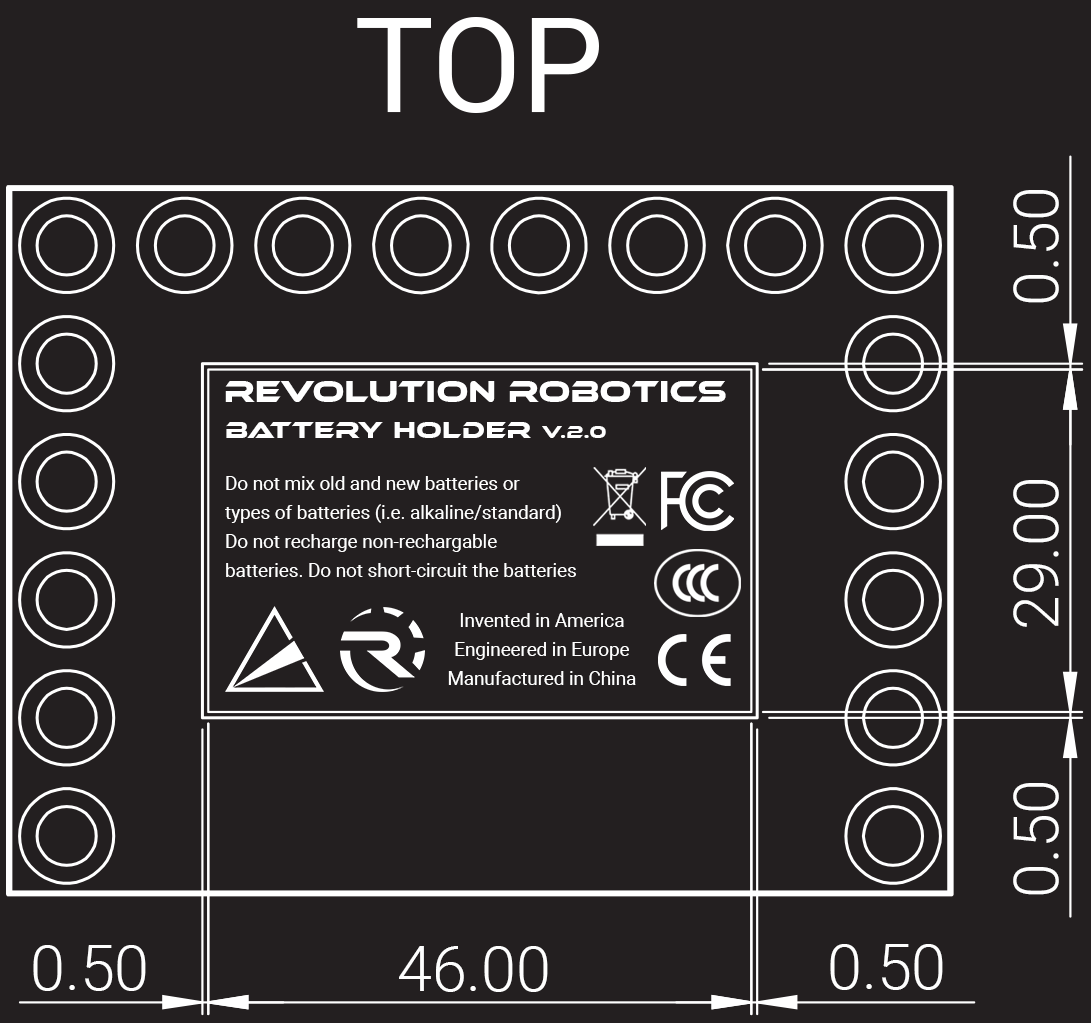
<style>
.page{position:relative;width:1091px;height:1023px;background:#231f20}
.page>*{position:absolute;margin:0}
.t1{font:62.5px "Roboto-Light";color:#fefefe}
.t2{font:29.5px "EthnocentricRg-Regular";letter-spacing:0.025em;color:#ffffff}
.t3{font:23.6px "EthnocentricRg-Regular";letter-spacing:0.04em;color:#ffffff}
.t4{font:17.7px "EthnocentricRg-Regular";letter-spacing:0.04em;color:#ffffff}
.t5{font:18.8px/29.2px "Roboto-Regular";color:#ffffff}
</style>
<div class="page">
<p class="t1" style="left:1013px;top:190px;width:46px;height:113px;rotate:-90deg">0.50</p>
<p class="t2" style="left:225px;top:381px;width:501px;height:21px">Revolution robotics</p>
<p class="t3" style="left:226px;top:422px;width:380px;height:16px">battery holder <span class="t4">v.2.0</span></p>
<p class="t5" style="left:225px;top:476px;width:351px;height:101px">Do not mix old and new batteries or<br>types of batteries (i.e. alkaline/standard)<br>Do not recharge non-rechargable <br>batteries. Do not short-circuit the batteries</p>
<p class="t1" style="left:1013px;top:480px;width:46px;height:147px;rotate:-90deg">29.00</p>
<p class="t5" style="left:448px;top:613px;width:188px;height:72px;text-align:center">Invented in America<br>Engineered in Europe<br>Manufactured in China</p>
<p class="t1" style="left:1013px;top:783px;width:46px;height:112px;rotate:-90deg">0.50</p>
<p class="t1" style="left:33px;top:945px;width:113px;height:46px">0.50</p>
<p class="t1" style="left:399px;top:946px;width:149px;height:46px">46.00</p>
<p class="t1" style="left:830px;top:944px;width:113px;height:46px">0.50</p>
</div>
